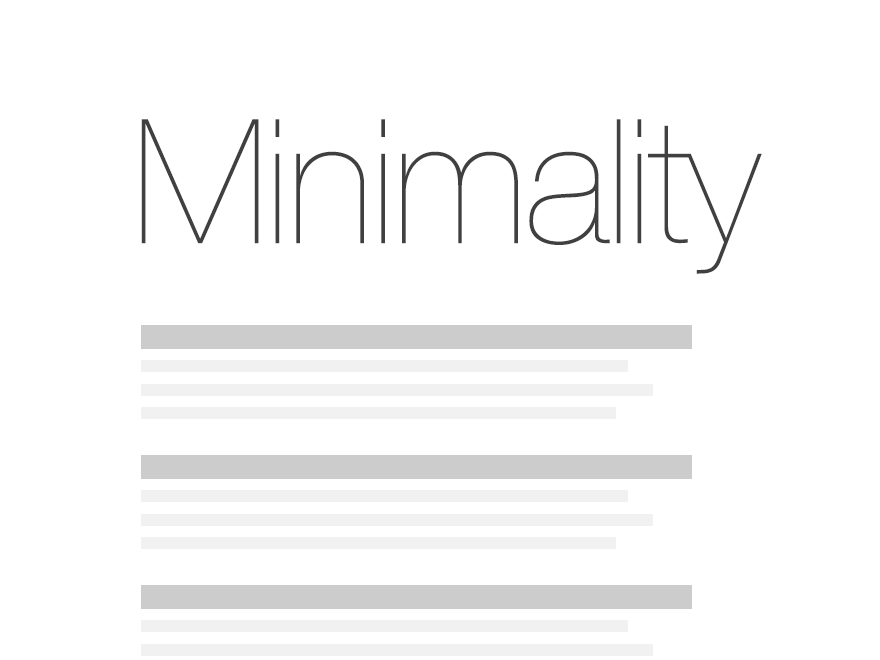
<style>
.page{position:relative;width:880px;height:660px;background:#ffffff}
.page>*{position:absolute;margin:0}
.t1{font:173.3px "HelveticaNeue-UltraLight";letter-spacing:-0.01em;color:#404040}
</style>
<div class="page">
<p class="t1" style="left:141px;top:119px;width:621px;height:155px">Minimality</p>
</div>
